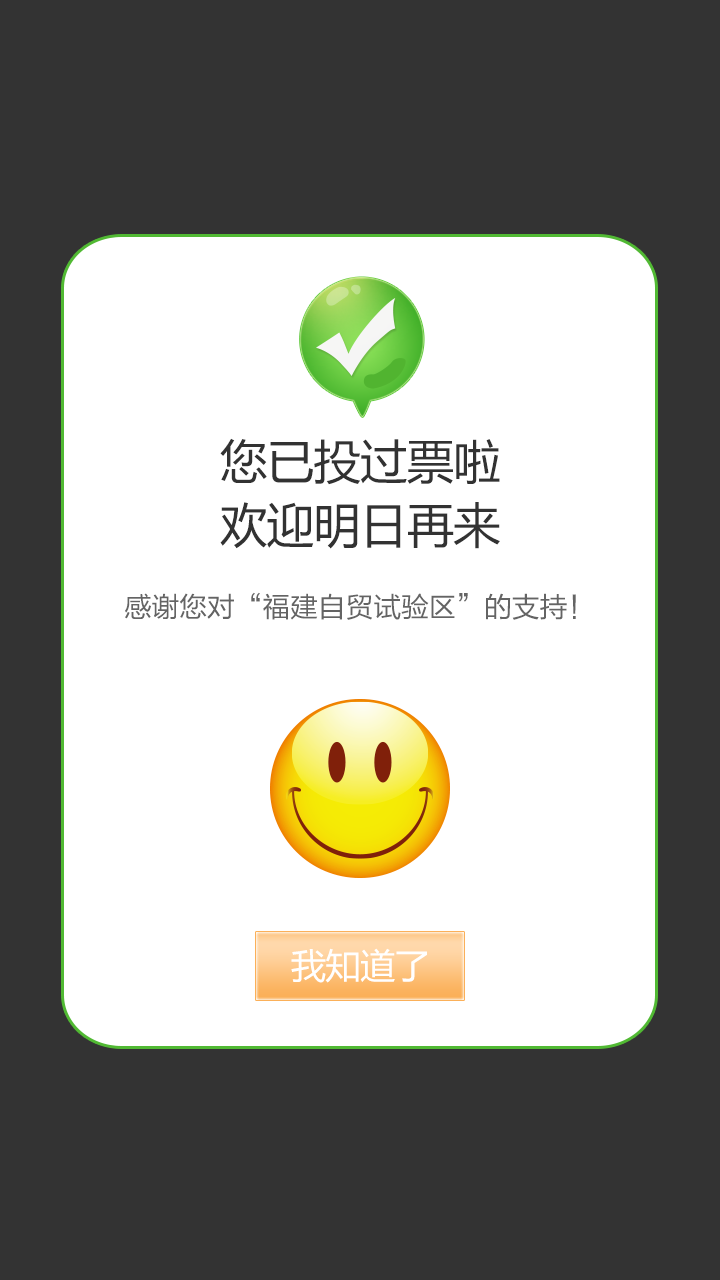
<style>
.page{position:relative;width:720px;height:1280px;background:#333333}
.page>*{position:absolute;margin:0}
.t1{font:47.2px "MicrosoftYaHei";letter-spacing:-0.01em;color:#323232}
.t2{font:47.6px "MicrosoftYaHei";letter-spacing:-0.01em;color:#323232}
.t3{font:28px "FZLTHK--GBK1-0";letter-spacing:-0.01em;color:#646464}
.t4{font:35px "MicrosoftYaHei";letter-spacing:-0.01em;color:#ffffff}
</style>
<div class="page">
<p class="t1" style="left:220px;top:438px;width:280px;height:47px">您已投过票啦</p>
<p class="t2" style="left:220px;top:502px;width:280px;height:47px">欢迎明日再来</p>
<p class="t3" style="left:125px;top:592px;width:451px;height:28px">感谢您对“福建自贸试验区”的支持！</p>
<p class="t4" style="left:291px;top:948px;width:136px;height:35px">我知道了</p>
</div>
